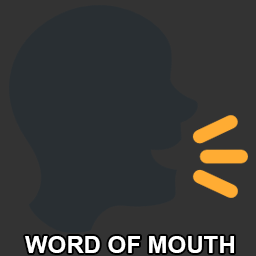
<style>
.page{position:relative;width:256px;height:256px;background:#292f33}
.page>*{position:absolute;margin:0}
.t1{font:24px "Arial-BoldMT";color:#ffffff}
</style>
<div class="page">
<p class="t1" style="left:25px;top:236px;width:209px;height:17px">WORD OF MOUTH</p>
</div>
